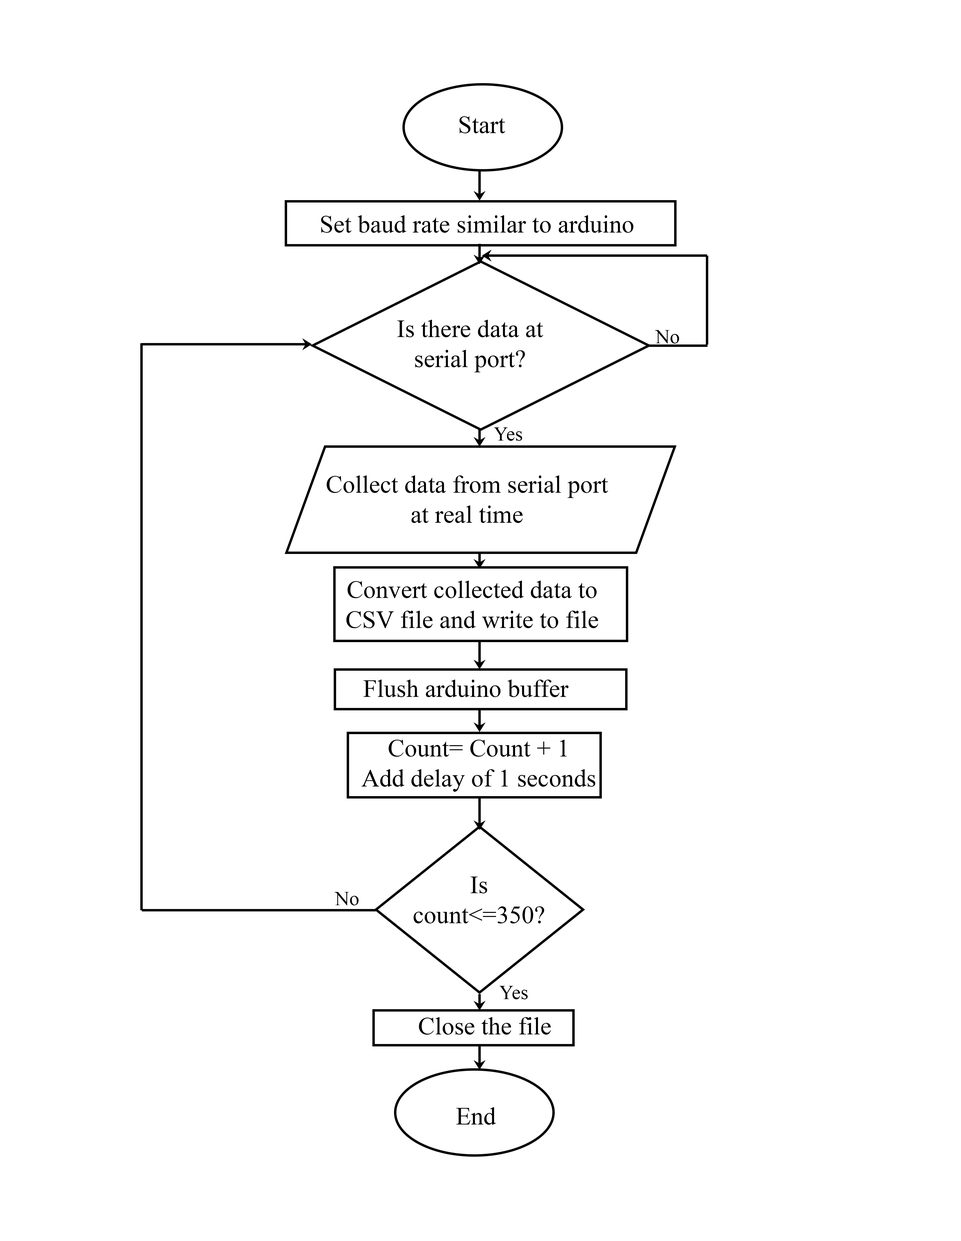
<style>
.page{position:relative;width:961px;height:1241px;background:#ffffff}
.page>*{position:absolute;margin:0}
.t1{font:25px "TimesNewRomanPSMT";color:#000000}
.t2{font:20px "TimesNewRomanPSMT";color:#000000}
</style>
<div class="page">
<p class="t1" style="left:459px;top:116px;width:46px;height:17px">Start</p>
<p class="t1" style="left:321px;top:215px;width:312px;height:18px">Set baud rate similar to arduino</p>
<p class="t1" style="left:397px;top:320px;width:146px;height:52px;text-align:center">Is there data at<br>serial port?</p>
<p class="t2" style="left:655px;top:330px;width:24px;height:14px">No</p>
<p class="t2" style="left:494px;top:427px;width:28px;height:14px">Yes</p>
<p class="t1" style="left:326px;top:475px;width:282px;height:48px;text-align:center">Collect data from serial port<br>at real time</p>
<p class="t1" style="left:346px;top:581px;width:252px;height:47px;text-align:center">Convert collected data to CSV file and write to file</p>
<p class="t1" style="left:363px;top:680px;width:206px;height:17px">Flush arduino buffer</p>
<p class="t1" style="left:361px;top:740px;width:234px;height:52px;text-align:center">Count= Count + 1<br>Add delay of 1 seconds</p>
<p class="t1" style="left:413px;top:877px;width:131px;height:46px;text-align:center">Is count&lt;=350?</p>
<p class="t2" style="left:335px;top:892px;width:24px;height:13px">No</p>
<p class="t2" style="left:499px;top:986px;width:29px;height:13px">Yes</p>
<p class="t1" style="left:419px;top:1017px;width:132px;height:18px">Close the file</p>
<p class="t1" style="left:456px;top:1107px;width:40px;height:18px">End</p>
</div>
